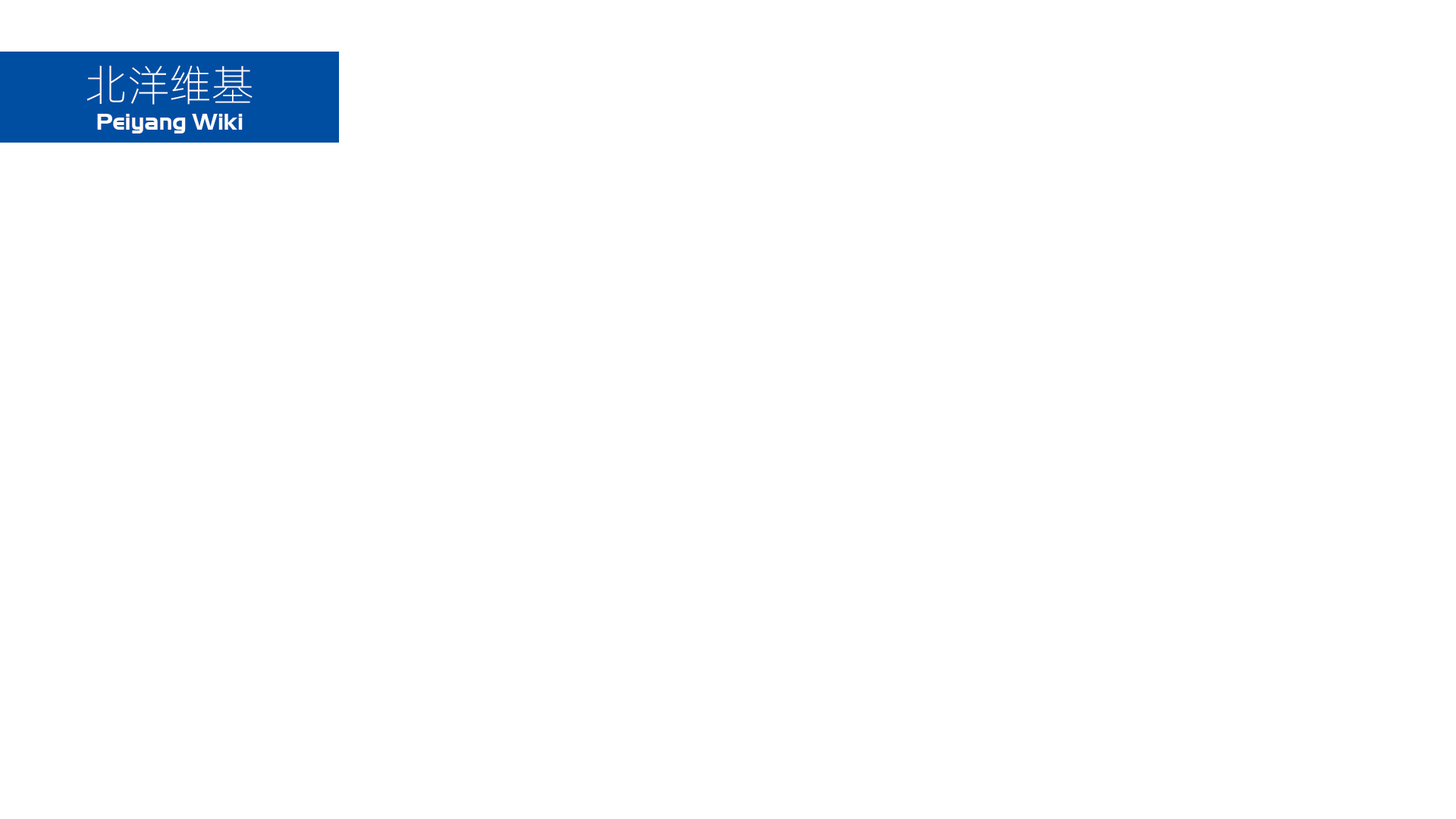
<style>
.page{position:relative;width:1456px;height:819px;background:#ffffff}
.page>*{position:absolute;margin:0}
.t1{font:43px "Alibaba-PuHuiTi-L";color:#fcfcfc}
.t2{font:22.7px "AeroRegularSWFTE";color:#fcfcfc}
</style>
<div class="page">
<p class="t1" style="left:86px;top:65px;width:167px;height:40px">北洋维基</p>
<p class="t2" style="left:97px;top:114px;width:146px;height:19px">Peiyang Wiki</p>
</div>
